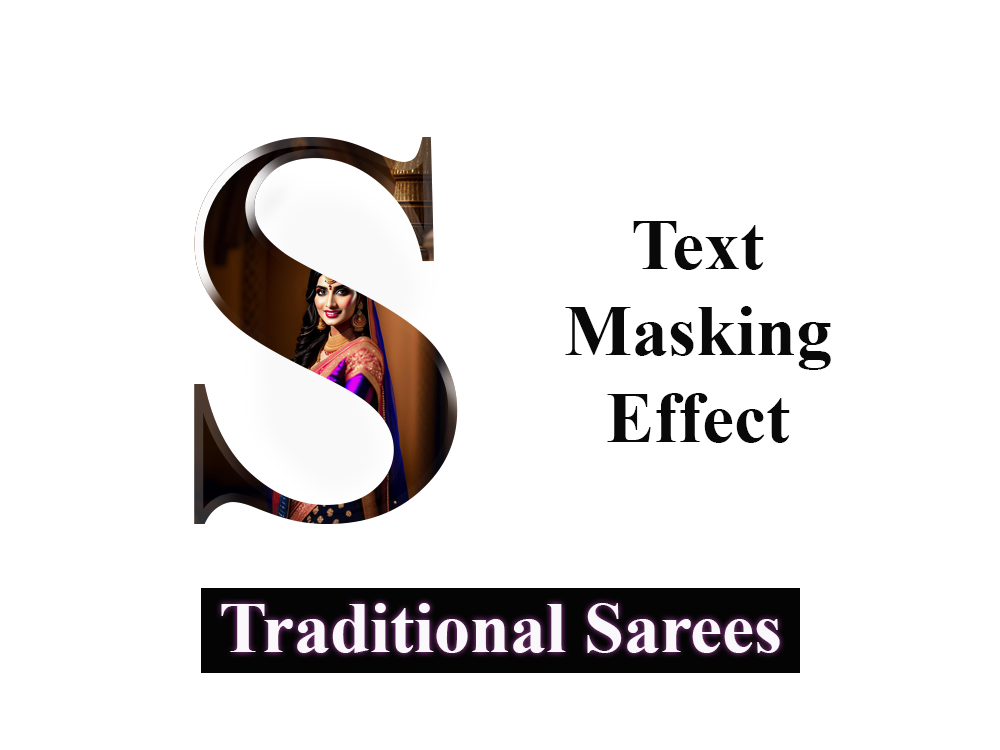
<style>
.page{position:relative;width:1000px;height:750px;background:#ffffff}
.page>*{position:absolute;margin:0}
.t1{font:72px "TimesNewRomanPS-BoldMT";color:#090909}
.t2{font:72px "TimesNewRomanPS-BoldMT";color:#fbf8fb}
</style>
<div class="page">
<p class="t1" style="left:565px;top:221px;width:266px;height:222px;text-align:center">Text<br>Masking<br>Effect</p>
<p class="t2" style="left:221px;top:603px;width:559px;height:50px">Traditional Sarees</p>
</div>
